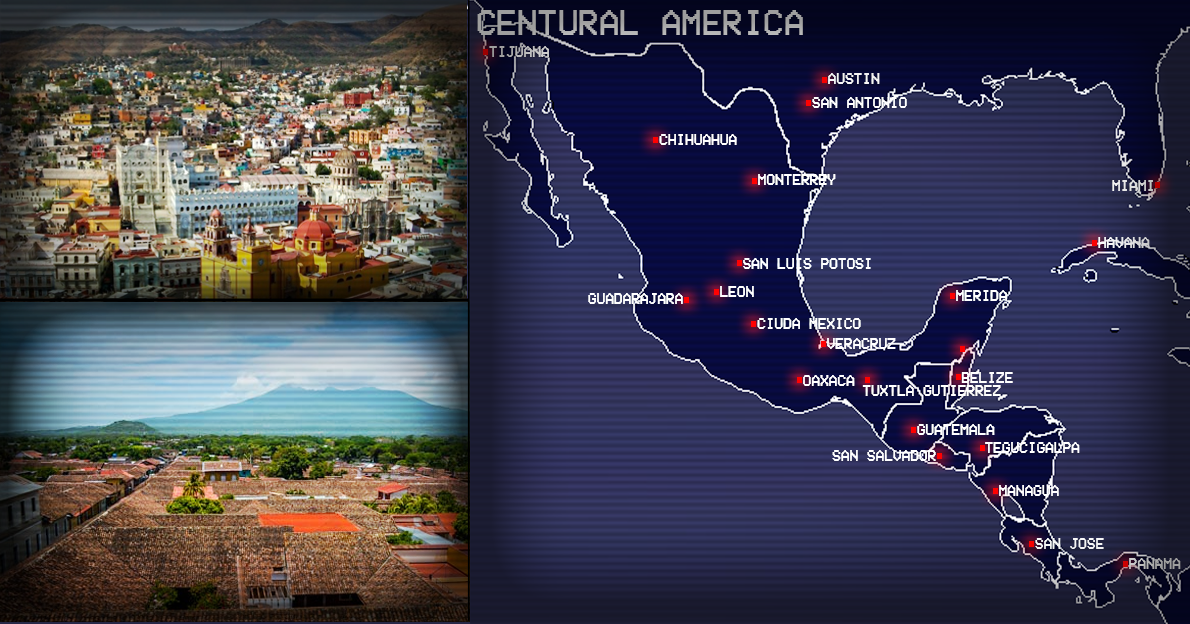
<style>
.page{position:relative;width:1190px;height:624px}
.page>*{position:absolute;margin:0}
.t1{font:37.3px "VCROSDMono";color:#9e9e9e;scale:0.94 1}
.t2{font:15.6px "VCROSDMono";color:#bdbdbd;scale:0.95 1}
.t3{font:15.6px "VCROSDMono";color:#ffffff;scale:0.95 1}
.t4{font:15.6px "VCROSDMono";color:#dedede;scale:0.95 1}
.t5{font:15.6px "VCROSDMono";color:#e8e8e8;scale:0.95 1}
.t6{font:15.6px "VCROSDMono";color:#a8a8a8;scale:0.95 1}
</style>
<div class="page">
<p class="t1" style="left:477px;top:10px;width:326px;height:25px">CENTURAL AMERICA</p>
<p class="t2" style="left:489px;top:46px;width:60px;height:11px">TIJUANA</p>
<p class="t3" style="left:828px;top:73px;width:52px;height:11px">AUSTIN</p>
<p class="t3" style="left:812px;top:97px;width:95px;height:11px">SAN ANTONIO</p>
<p class="t3" style="left:659px;top:134px;width:78px;height:11px">CHIHUAHUA</p>
<p class="t3" style="left:758px;top:174px;width:78px;height:11px">MONTERREY</p>
<p class="t4" style="left:1112px;top:180px;width:41px;height:11px">MIAMI</p>
<p class="t5" style="left:1098px;top:237px;width:52px;height:11px">HAVANA</p>
<p class="t3" style="left:743px;top:258px;width:128px;height:11px">SAN LUIS POTOSI</p>
<p class="t3" style="left:588px;top:293px;width:95px;height:11px">GUADARAJARA</p>
<p class="t3" style="left:720px;top:286px;width:34px;height:11px">LEON</p>
<p class="t3" style="left:956px;top:290px;width:51px;height:11px">MERIDA</p>
<p class="t3" style="left:757px;top:318px;width:104px;height:11px">CIUDA MEXICO</p>
<p class="t3" style="left:827px;top:338px;width:69px;height:11px">VERACRUZ</p>
<p class="t3" style="left:803px;top:375px;width:52px;height:11px">OAXACA</p>
<p class="t3" style="left:961px;top:372px;width:52px;height:11px">BELIZE</p>
<p class="t3" style="left:862px;top:385px;width:139px;height:11px">TUXTLA GUTIERREZ</p>
<p class="t3" style="left:917px;top:424px;width:78px;height:11px">GUATEMALA</p>
<p class="t3" style="left:985px;top:442px;width:95px;height:11px">TEGUCIGALPA</p>
<p class="t3" style="left:832px;top:450px;width:104px;height:11px">SAN SALVADOR</p>
<p class="t3" style="left:999px;top:485px;width:60px;height:11px">MANAGUA</p>
<p class="t3" style="left:1035px;top:538px;width:69px;height:11px">SAN JOSE</p>
<p class="t6" style="left:1129px;top:558px;width:52px;height:11px">PANAMA</p>
</div>
